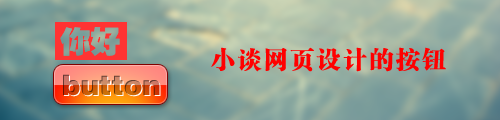
<style>
.page{position:relative;width:500px;height:120px}
.page>*{position:absolute;margin:0}
.t1{font:24px "FZCSJW--GB1-0";letter-spacing:0.1em;color:#ff0000}
.t2{font:28px "FZCCHJW--GB1-0"}
</style>
<div class="page">
<p class="t1" style="left:211px;top:47px;width:235px;height:25px">小谈网页设计的按钮</p>
<p class="t2" style="left:63px;top:74px;width:97px;height:22px">button</p>
</div>
